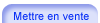
<style>
.page{position:relative;width:100px;height:23px;background:#dce1fb}
.page>*{position:absolute;margin:0}
.t1{font:11px "ArialMT";color:#092ff6}
</style>
<div class="page">
<p class="t1" style="left:14px;top:12px;width:75px;height:8px">Mettre en vente</p>
</div>
